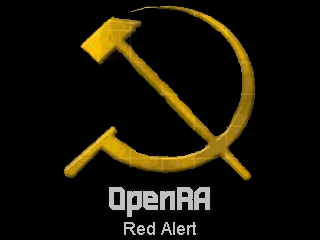
<style>
.page{position:relative;width:320px;height:240px;background:#000000}
.page>*{position:absolute;margin:0}
.t1{font:48px "ZoodRangmah2.1";color:#c0c0c0}
.t2{font:18px "ArialMT";color:#c0c0c0}
</style>
<div class="page">
<p class="t1" style="left:109px;top:187px;width:101px;height:30px">OpenRA</p>
<p class="t2" style="left:124px;top:222px;width:72px;height:13px">Red Alert</p>
</div>
